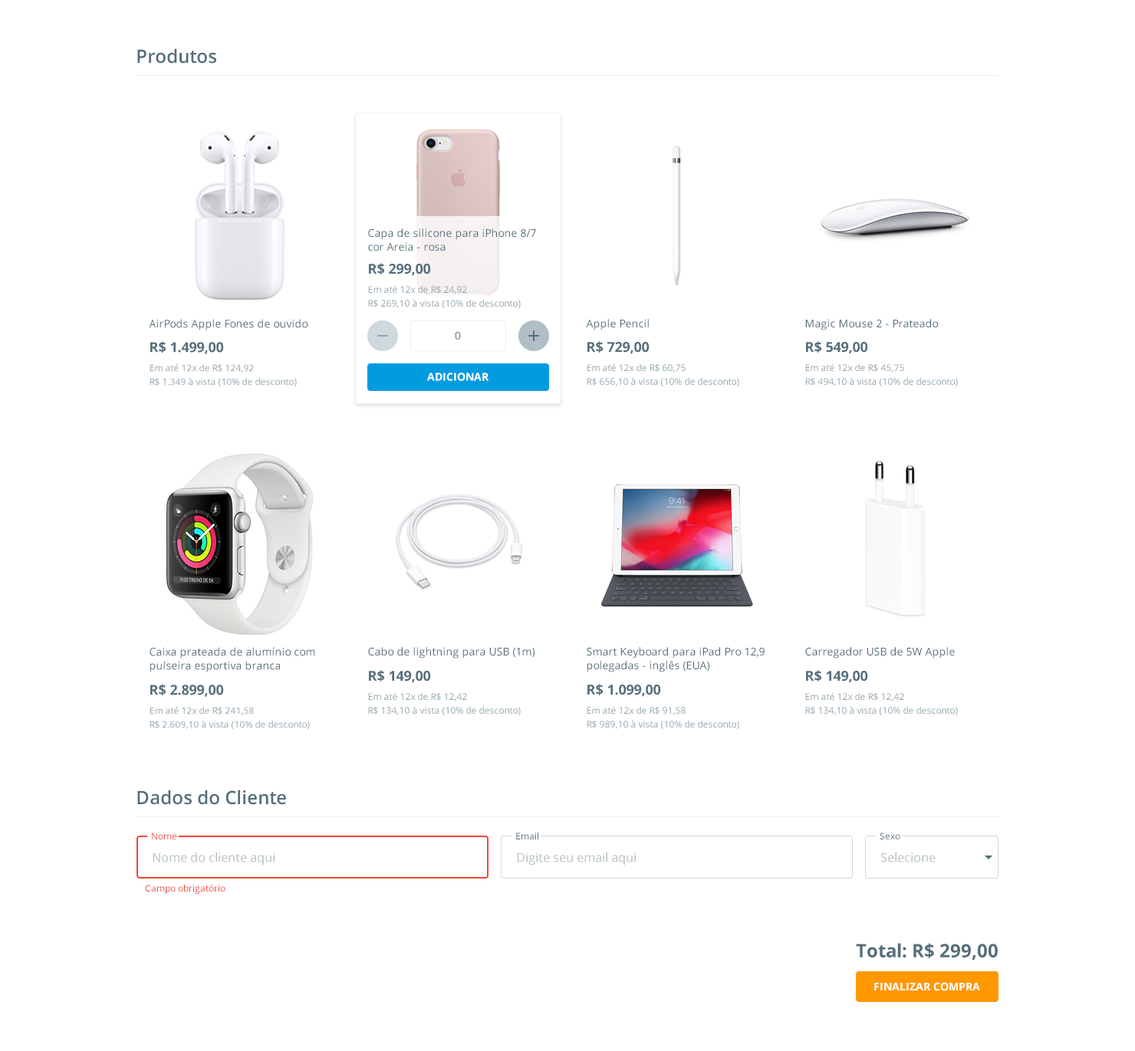
<style>
.page{position:relative;width:1135px;height:1051px;background:#ffffff}
.page>*{position:absolute;margin:0}
.t1{font:18.4px "OpenSans-SemiBold";color:#546e7a}
.t2{font:10.7px/13.8px "OpenSans";color:#546e7a}
.t3{font:13.8px "OpenSans-Bold";color:#546e7a}
.t4{font:9.2px/13.8px "OpenSans";color:#90a4ae}
.t5{font:10.7px "OpenSans";color:#546e7a}
.t6{font:10.7px "OpenSans-Bold";color:#ffffff;text-transform:uppercase}
.t7{font:9.2px "OpenSans";color:#f44336}
.t8{font:9.2px "OpenSans";color:#546e7a}
.t9{font:12.3px "OpenSans";color:#b6bfc3}
.t10{font:18.4px "OpenSans-Bold";color:#546e7a}
</style>
<div class="page">
<p class="t1" style="left:137px;top:48px;width:79px;height:16px">Produtos</p>
<p class="t2" style="left:368px;top:228px;width:168px;height:23px">Capa de silicone para iPhone 8/7<br>cor Areia - rosa</p>
<p class="t3" style="left:369px;top:263px;width:62px;height:13px">R$ 299,00</p>
<p class="t4" style="left:368px;top:285px;width:153px;height:23px">Em até 12x de R$ 24,92<br>R$ 269,10 à vista (10% de desconto)</p>
<p class="t5" style="left:149px;top:319px;width:159px;height:11px">AirPods Apple Fones de ouvido</p>
<p class="t5" style="left:586px;top:319px;width:63px;height:11px">Apple Pencil</p>
<p class="t5" style="left:805px;top:319px;width:133px;height:11px">Magic Mouse 2 - Prateado</p>
<p class="t3" style="left:150px;top:341px;width:73px;height:13px">R$ 1.499,00</p>
<p class="t5" style="left:455px;top:331px;width:6px;height:9px">0</p>
<p class="t3" style="left:587px;top:341px;width:62px;height:13px">R$ 729,00</p>
<p class="t3" style="left:806px;top:341px;width:62px;height:13px">R$ 549,00</p>
<p class="t4" style="left:149px;top:364px;width:148px;height:23px">Em até 12x de R$ 124,92<br>R$ 1.349 à vista (10% de desconto)</p>
<p class="t4" style="left:586px;top:363px;width:153px;height:23px">Em até 12x de R$ 60,75<br>R$ 656,10 à vista (10% de desconto)</p>
<p class="t4" style="left:805px;top:363px;width:152px;height:23px">Em até 12x de R$ 45,75<br>R$ 494,10 à vista (10% de desconto)</p>
<p class="t6" style="left:427px;top:373px;width:62px;height:8px">adicionar</p>
<p class="t2" style="left:149px;top:647px;width:166px;height:25px">Caixa prateada de alumínio com<br>pulseira esportiva branca</p>
<p class="t5" style="left:368px;top:647px;width:166px;height:12px">Cabo de lightning para USB (1m)</p>
<p class="t2" style="left:586px;top:647px;width:178px;height:25px">Smart Keyboard para iPad Pro 12,9<br>polegadas - inglês (EUA)</p>
<p class="t5" style="left:805px;top:647px;width:149px;height:12px">Carregador USB de 5W Apple</p>
<p class="t3" style="left:369px;top:670px;width:62px;height:13px">R$ 149,00</p>
<p class="t3" style="left:806px;top:670px;width:62px;height:13px">R$ 149,00</p>
<p class="t3" style="left:150px;top:684px;width:73px;height:13px">R$ 2.899,00</p>
<p class="t3" style="left:587px;top:684px;width:74px;height:13px">R$ 1.099,00</p>
<p class="t4" style="left:368px;top:692px;width:153px;height:23px">Em até 12x de R$ 12,42<br>R$ 134,10 à vista (10% de desconto)</p>
<p class="t4" style="left:805px;top:692px;width:152px;height:23px">Em até 12x de R$ 12,42<br>R$ 134,10 à vista (10% de desconto)</p>
<p class="t4" style="left:149px;top:707px;width:161px;height:23px">Em até 12x de R$ 241,58<br>R$ 2.609,10 à vista (10% de desconto)</p>
<p class="t4" style="left:586px;top:706px;width:153px;height:23px">Em até 12x de R$ 91,58<br>R$ 989,10 à vista (10% de desconto)</p>
<p class="t1" style="left:137px;top:790px;width:149px;height:15px">Dados do Cliente</p>
<p class="t7" style="left:152px;top:833px;width:24px;height:6px">Nome</p>
<p class="t8" style="left:516px;top:833px;width:22px;height:6px">Email</p>
<p class="t8" style="left:879px;top:833px;width:21px;height:6px">Sexo</p>
<p class="t9" style="left:153px;top:852px;width:121px;height:13px">Nome do cliente aqui</p>
<p class="t9" style="left:517px;top:852px;width:119px;height:13px">Digite seu email aqui</p>
<p class="t9" style="left:881px;top:852px;width:54px;height:10px">Selecione</p>
<p class="t7" style="left:145px;top:884px;width:80px;height:10px">Campo obrigatório</p>
<p class="t10" style="left:856px;top:943px;width:141px;height:17px">Total: R$ 299,00</p>
<p class="t6" style="left:874px;top:982px;width:106px;height:9px">finalizar compra</p>
</div>
